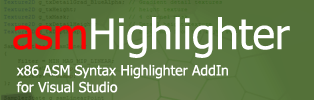
<style>
.page{position:relative;width:314px;height:100px}
.page>*{position:absolute;margin:0}
.t1{font:42px "Tahoma";color:#ffffff}
.t2{font:42px "Tahoma";color:#fe0101}
.t3{font:14px "Tahoma";color:#ffffff}
</style>
<div class="page">
<p class="t1" style="left:13px;top:17px;width:277px;height:41px"><span class="t2">asm</span>Highlighter</p>
<p class="t3" style="left:16px;top:64px;width:212px;height:29px">x86 ASM Syntax Highlighter AddIn<br>for Visual Studio</p>
</div>
